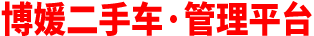
<style>
.page{position:relative;width:314px;height:36px;background:#ffffff}
.page>*{position:absolute;margin:0}
.t1{font:36px "SourceHanSansCN-Heavy";color:#fe0000;scale:0.9 1}
</style>
<div class="page">
<p class="t1" style="left:1px;top:1px;width:311px;height:35px">博媛二手车·管理平台</p>
</div>
